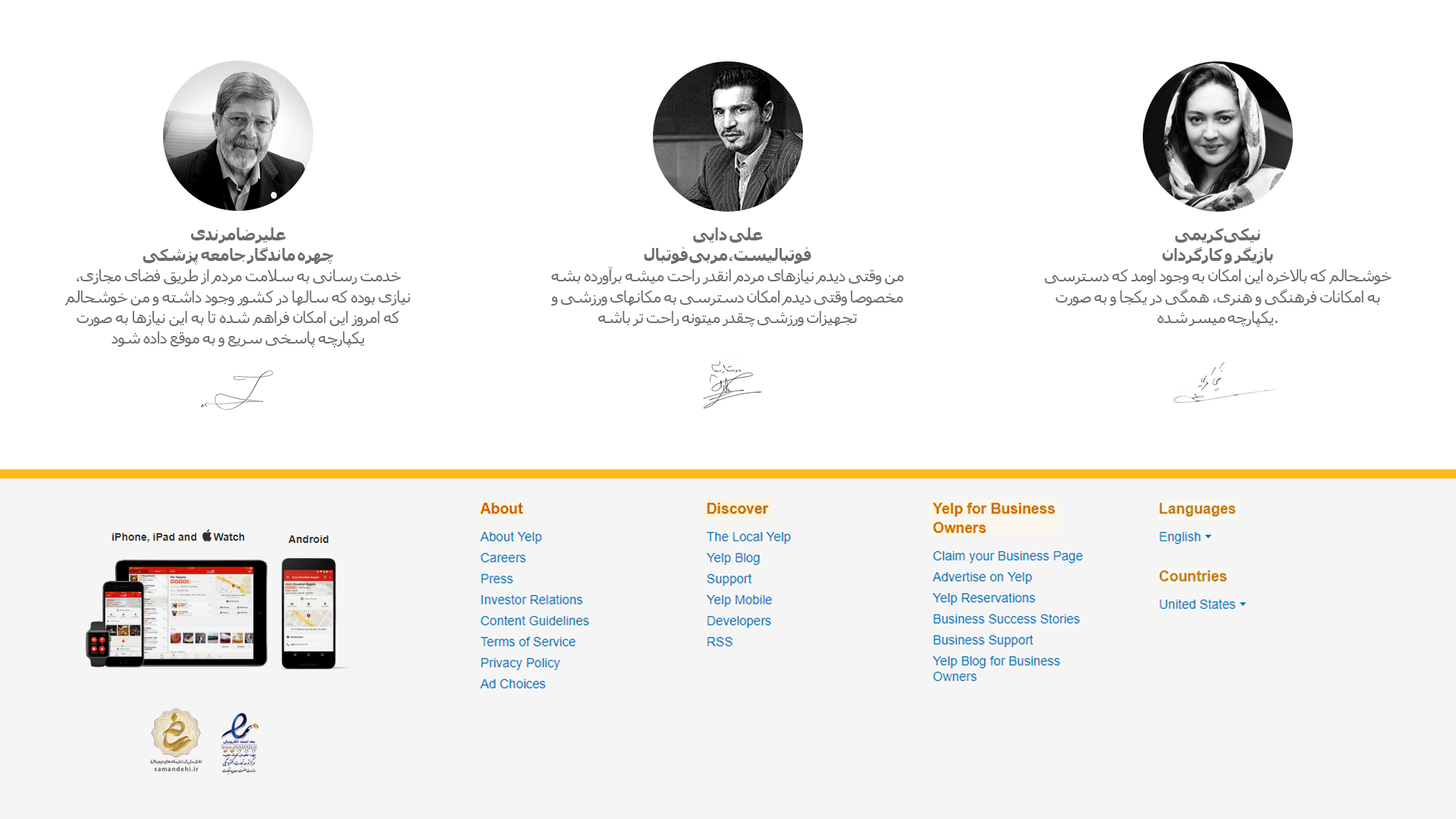
<style>
.page{position:relative;width:1456px;height:819px;background:#ffffff}
.page>*{position:absolute;margin:0}
.t1{font:15.8px/20.5px "Tahoma";letter-spacing:-0.04em;color:#6c6d70}
.t2{font:15.8px/20.5px "Tahoma-Bold";letter-spacing:-0.04em;color:#6c6d70}
</style>
<div class="page">
<p class="t1" style="left:64px;top:227px;width:346px;height:120px;text-align:center"><span class="t2">علیرضا مرندی <br>چهره ماندگار جامعه پزشکی <br></span>خدمت رسانی به سلامت مردم از طریق فضای مجازی، نیازی بوده که سالها در کشور وجود داشته و من خوشحالم که امروز این امکان فراهم شده تا به این نیازها به صورت یکپارچه پاسخی سریع و به موقع داده شود</p>
<p class="t1" style="left:551px;top:227px;width:353px;height:100px;text-align:center"><span class="t2">علی دایی <br>فوتبالیست، مربی فوتبال <br></span>من وقتی دیدم نیازهای مردم انقدر راحت میشه برآورده بشه<br>مخصوصا وقتی دیدم امکان دسترسی به مکانهای ورزشی و تجهیزات ورزشی چقدر میتونه راحت تر باشه</p>
<p class="t1" style="left:1044px;top:227px;width:348px;height:100px;text-align:center"><span class="t2">نیکی کریمی <br>بازیگر و کارگردان<br></span>خوشحالم که بالاخره این امکان به وجود اومد که دسترسی به امکانات فرهنگی و هنری، همگی در یکجا و به صورت یکپارچه میسر شده.</p>
</div>
